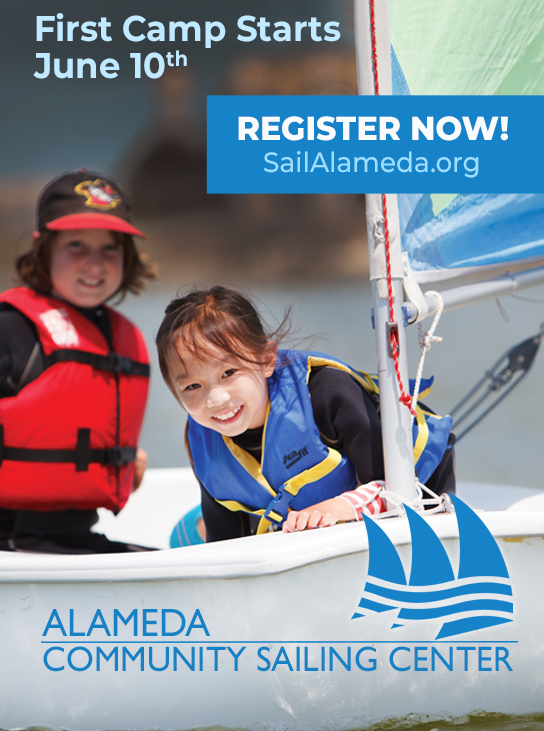
<style>
.page{position:relative;width:544px;height:731px}
.page>*{position:absolute;margin:0}
.t1{font:35.6px "Montserrat-Bold";color:#c1e9ff;scale:0.95 1}
.t2{font:33.2px "Montserrat-ExtraBold";color:#f9fbfc;scale:0.95 1}
.t3{font:27.7px "Montserrat-Medium";color:#9edfff;scale:0.95 1}
.t4{font:35.6px "GillSans";color:#1681c4;scale:0.95 1}
.t5{font:39.6px "GillSans";color:#1681c4;scale:0.95 1}
</style>
<div class="page">
<p class="t1" style="left:33px;top:13px;width:308px;height:66px">First Camp Starts <br>June 10th</p>
<p class="t2" style="left:238px;top:116px;width:270px;height:25px">REGISTER NOW!</p>
<p class="t3" style="left:264px;top:151px;width:215px;height:27px">SailAlameda.org</p>
<p class="t4" style="left:42px;top:609px;width:472px;height:63px"><span class="t5">ALAMEDA<br><br></span>COMMUNITY SAILING CENTER</p>
</div>
